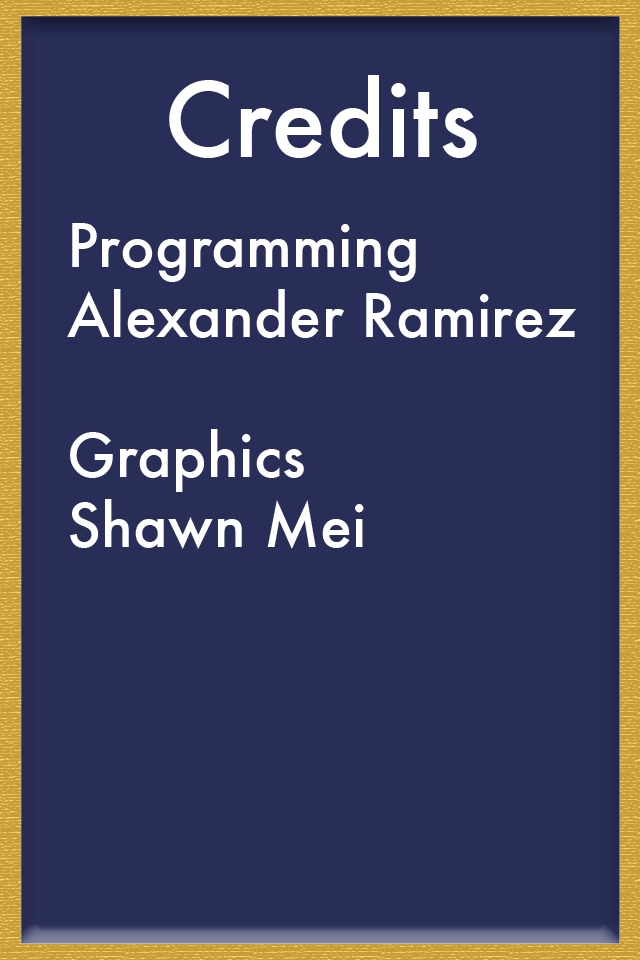
<style>
.page{position:relative;width:640px;height:960px;background:#292e59}
.page>*{position:absolute;margin:0}
.t1{font:100px "Futura-Medium";color:#ffffff}
.t2{font:58.3px "Futura-Medium";color:#ffffff}
</style>
<div class="page">
<p class="t1" style="left:169px;top:75px;width:308px;height:83px">Credits</p>
<p class="t2" style="left:67px;top:223px;width:509px;height:326px">Programming<br>Alexander Ramirez<br><br>Graphics<br>Shawn Mei</p>
</div>
